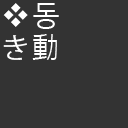
<style>
.page{position:relative;width:128px;height:128px;background:#333333}
.page>*{position:absolute;margin:0}
.t1{font:29.2px "MalgunGothic";color:#ffffff}
.t2{font:29.2px "KozGoPr6N-Regular";color:#ffffff}
.t3{font:29.2px "MicrosoftJhengHeiRegular";color:#ffffff}
</style>
<div class="page">
<p class="t1" style="left:33px;top:3px;width:26px;height:26px">동</p>
<p class="t2" style="left:3px;top:35px;width:24px;height:25px">き</p>
<p class="t3" style="left:32px;top:34px;width:25px;height:26px">動</p>
</div>
